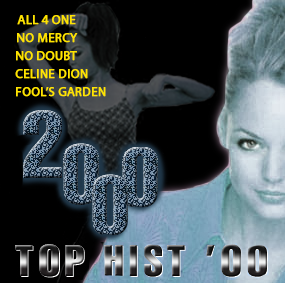
<style>
.page{position:relative;width:285px;height:283px;background:#000000}
.page>*{position:absolute;margin:0}
.t1{font:22px "MyriadPro-Regular";color:#ffe400;font-weight:bold}
</style>
<div class="page">
<p class="t1" style="left:17px;top:15px;width:59px;height:10px">ALL 4 ONE</p>
<p class="t1" style="left:17px;top:33px;width:61px;height:10px">NO MERCY</p>
<p class="t1" style="left:16px;top:51px;width:61px;height:10px">NO DOUBT</p>
<p class="t1" style="left:15px;top:69px;width:73px;height:10px">CELINE DION</p>
<p class="t1" style="left:16px;top:87px;width:90px;height:10px">FOOL’S GARDEN</p>
</div>
